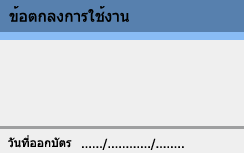
<style>
.page{position:relative;width:244px;height:153px;background:#efefef}
.page>*{position:absolute;margin:0}
.t1{font:15.7px "Tahoma";color:#000000}
.t2{font:12px "Tahoma";color:#000000}
</style>
<div class="page">
<p class="t1" style="left:9px;top:6px;width:120px;height:16px">ข้อตกลงการใช้งาน</p>
<p class="t2" style="left:8px;top:135px;width:64px;height:13px">วันที่ออกบัตร</p>
<p class="t2" style="left:82px;top:138px;width:102px;height:12px">....../............/........</p>
</div>
